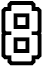
<style>
.page{position:relative;width:43px;height:67px;background:#ffffff}
.page>*{position:absolute;margin:0}
.t1{font:72px "Cubic_11";letter-spacing:0.1em;color:#ffffff;font-weight:bold}
</style>
<div class="page">
<p class="t1" style="left:5px;top:5px;width:33px;height:57px">8</p>
</div>
